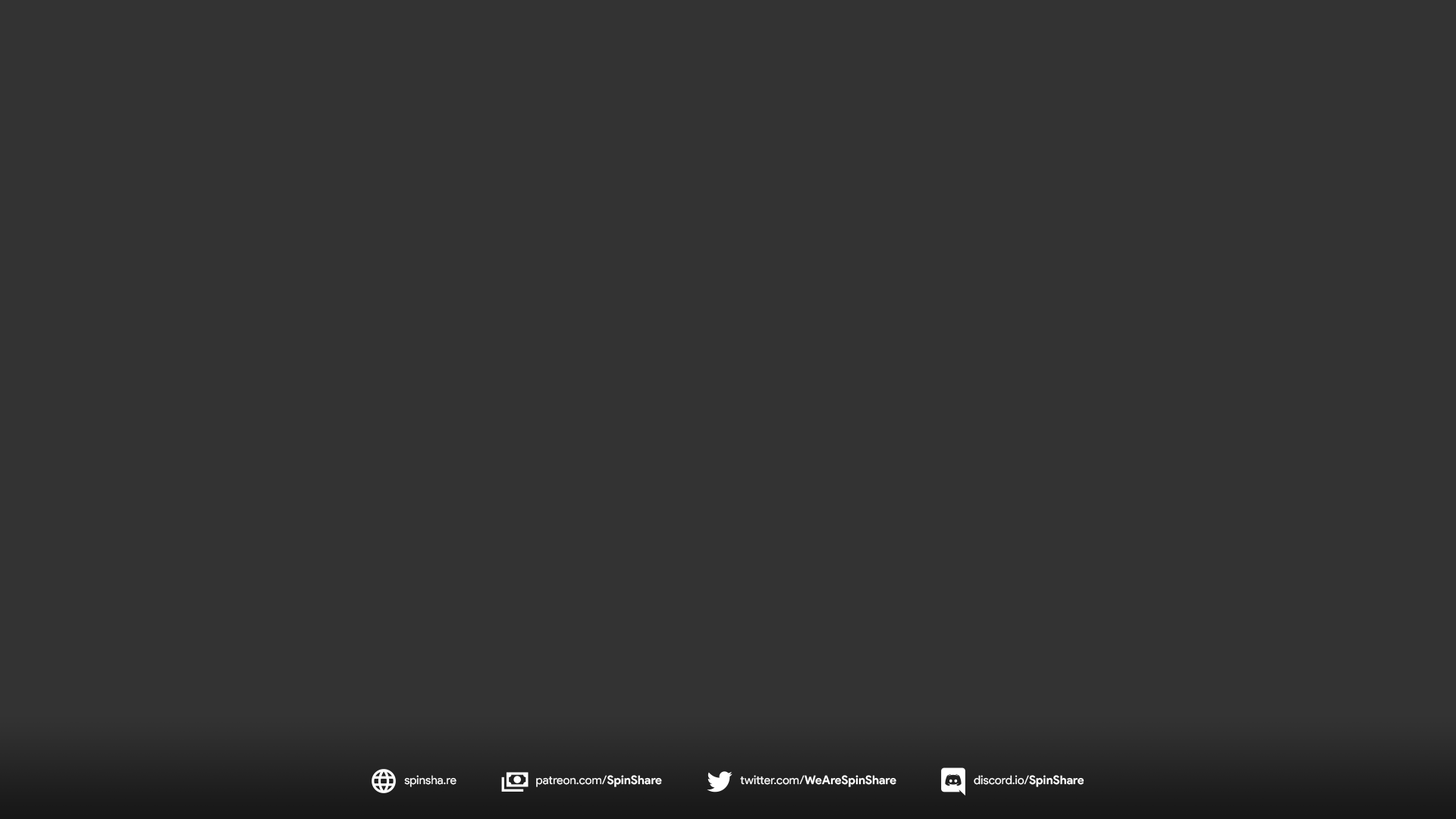
<style>
.page{position:relative;width:1456px;height:819px;background:#333333}
.page>*{position:absolute;margin:0}
.t1{font:11.9px "ProductSans-Regular";color:#ffffff}
.t2{font:11.9px "ProductSans-Bold";color:#ffffff}
</style>
<div class="page">
<p class="t1" style="left:404px;top:775px;width:53px;height:12px">spinsha.re</p>
<p class="t1" style="left:536px;top:775px;width:126px;height:12px">patreon.com/<span class="t2">SpinShare</span></p>
<p class="t2" style="left:740px;top:775px;width:156px;height:12px"><span class="t1">twitter.com/</span>WeAreSpinShare</p>
<p class="t1" style="left:974px;top:775px;width:110px;height:12px">discord.io/<span class="t2">SpinShare</span></p>
</div>
